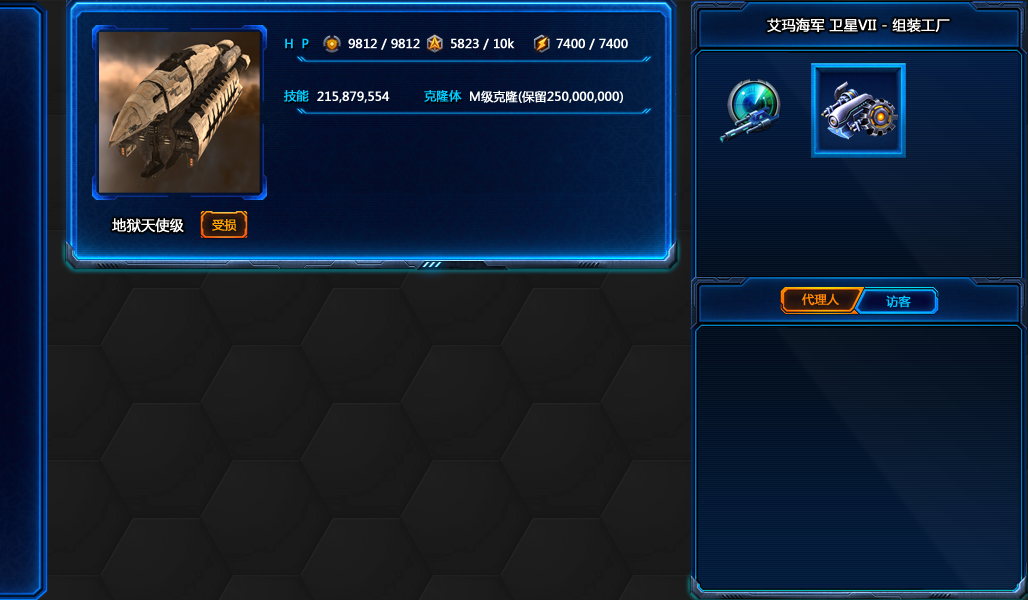
<style>
.page{position:relative;width:1028px;height:600px}
.page>*{position:absolute;margin:0}
.t1{font:14px "MicrosoftYaHei";color:#ffffff;font-weight:bold}
.t2{font:12px "MicrosoftYaHei";color:#00ccff;font-weight:bold}
.t3{font:12px "MicrosoftYaHei";color:#ffffff;font-weight:bold}
.t4{font:12px "MicrosoftYaHei";color:#ffa200;font-weight:bold}
.t5{font:12px "MicrosoftYaHei";color:#ff8400;font-weight:bold}
.t6{font:12px "MicrosoftYaHei";color:#00c6ff;font-weight:bold}
</style>
<div class="page">
<p class="t1" style="left:767px;top:18px;width:183px;height:15px">艾玛海军 卫星VII - 组装工厂</p>
<p class="t2" style="left:285px;top:38px;width:24px;height:11px">H  P</p>
<p class="t3" style="left:348px;top:38px;width:72px;height:12px">9812 / 9812</p>
<p class="t3" style="left:451px;top:38px;width:64px;height:12px">5823 / 10k</p>
<p class="t3" style="left:556px;top:38px;width:72px;height:12px">7400 / 7400</p>
<p class="t2" style="left:284px;top:89px;width:25px;height:13px">技能</p>
<p class="t3" style="left:317px;top:91px;width:73px;height:12px">215,879,554</p>
<p class="t2" style="left:424px;top:90px;width:38px;height:12px">克隆体</p>
<p class="t3" style="left:470px;top:90px;width:153px;height:13px">M级克隆(保留250,000,000)</p>
<p class="t1" style="left:112px;top:218px;width:72px;height:15px">地狱天使级</p>
<p class="t4" style="left:212px;top:219px;width:25px;height:12px">受损</p>
<p class="t5" style="left:802px;top:293px;width:37px;height:13px">代理人</p>
<p class="t6" style="left:886px;top:295px;width:25px;height:13px">访客</p>
</div>
